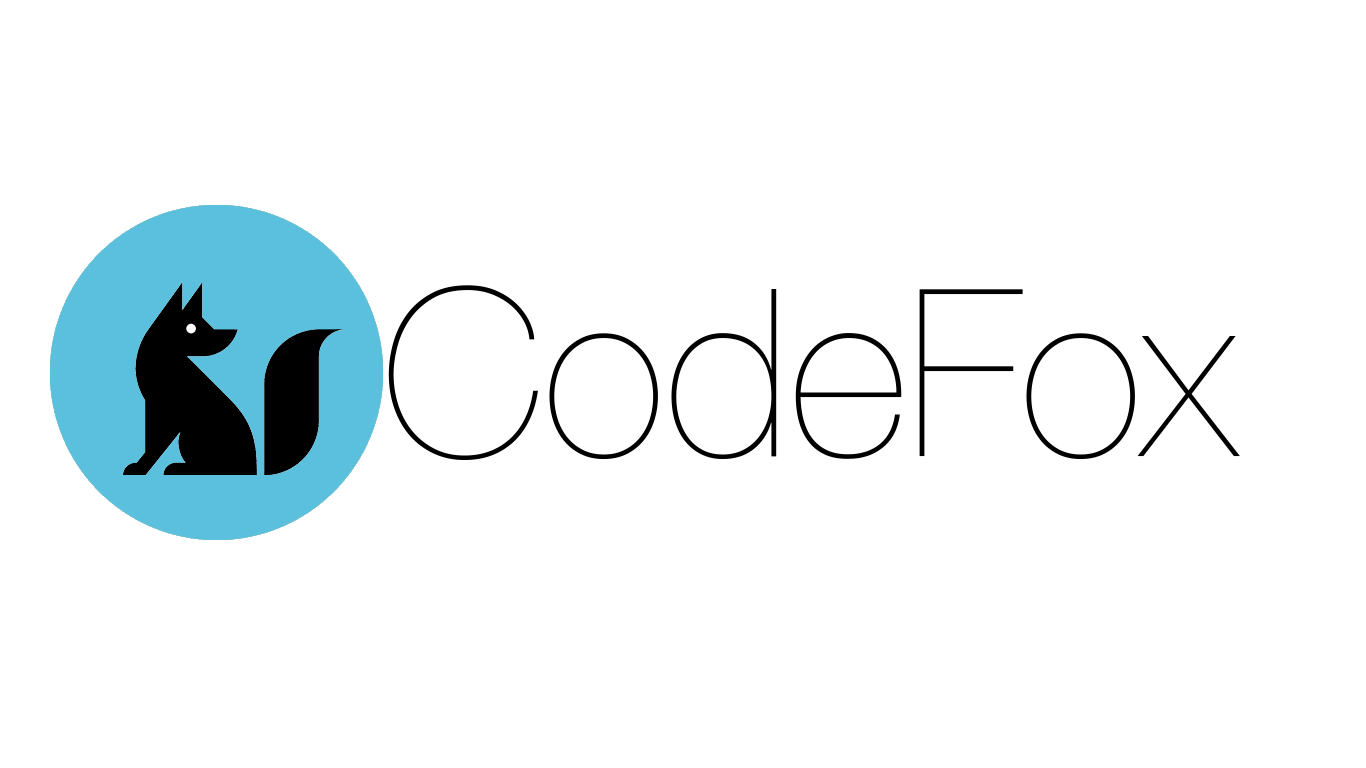
<style>
.page{position:relative;width:1366px;height:768px;background:#ffffff}
.page>*{position:absolute;margin:0}
.t1{font:234px "HelveticaNeue-UltraLight";color:#000000}
</style>
<div class="page">
<p class="t1" style="left:388px;top:285px;width:852px;height:175px">CodeFox</p>
</div>
